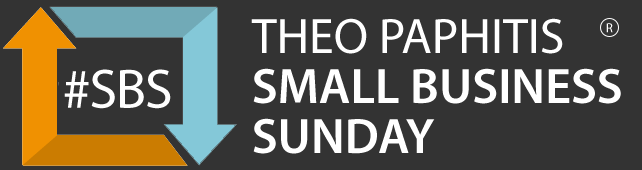
<style>
.page{position:relative;width:642px;height:170px;background:#333333}
.page>*{position:absolute;margin:0}
.t1{font:50px/50px "MyriadPro-Semibold";color:#ffffff}
.t2{font:50px/50px "MyriadPro-Regular";color:#ffffff}
.t3{font:13px "MyriadPro-Regular";color:#ffffff}
.t4{font:56px "MyriadPro-Regular";letter-spacing:-0.02em;color:#ffffff}
</style>
<div class="page">
<p class="t1" style="left:251px;top:18px;width:370px;height:136px"><span class="t2">THEO PAPHITIS<br></span>SMALL BUSINESS<br>SUNDAY</p>
<p class="t3" style="left:606px;top:23px;width:7px;height:10px">R</p>
<p class="t4" style="left:64px;top:69px;width:107px;height:40px">#SBS</p>
</div>
